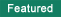
<style>
.page{position:relative;width:61px;height:17px;background:#137e62}
.page>*{position:absolute;margin:0}
.t1{font:11px "ArialMT";color:#ffffff;font-weight:bold}
</style>
<div class="page">
<p class="t1" style="left:8px;top:4px;width:45px;height:9px">Featured</p>
</div>
